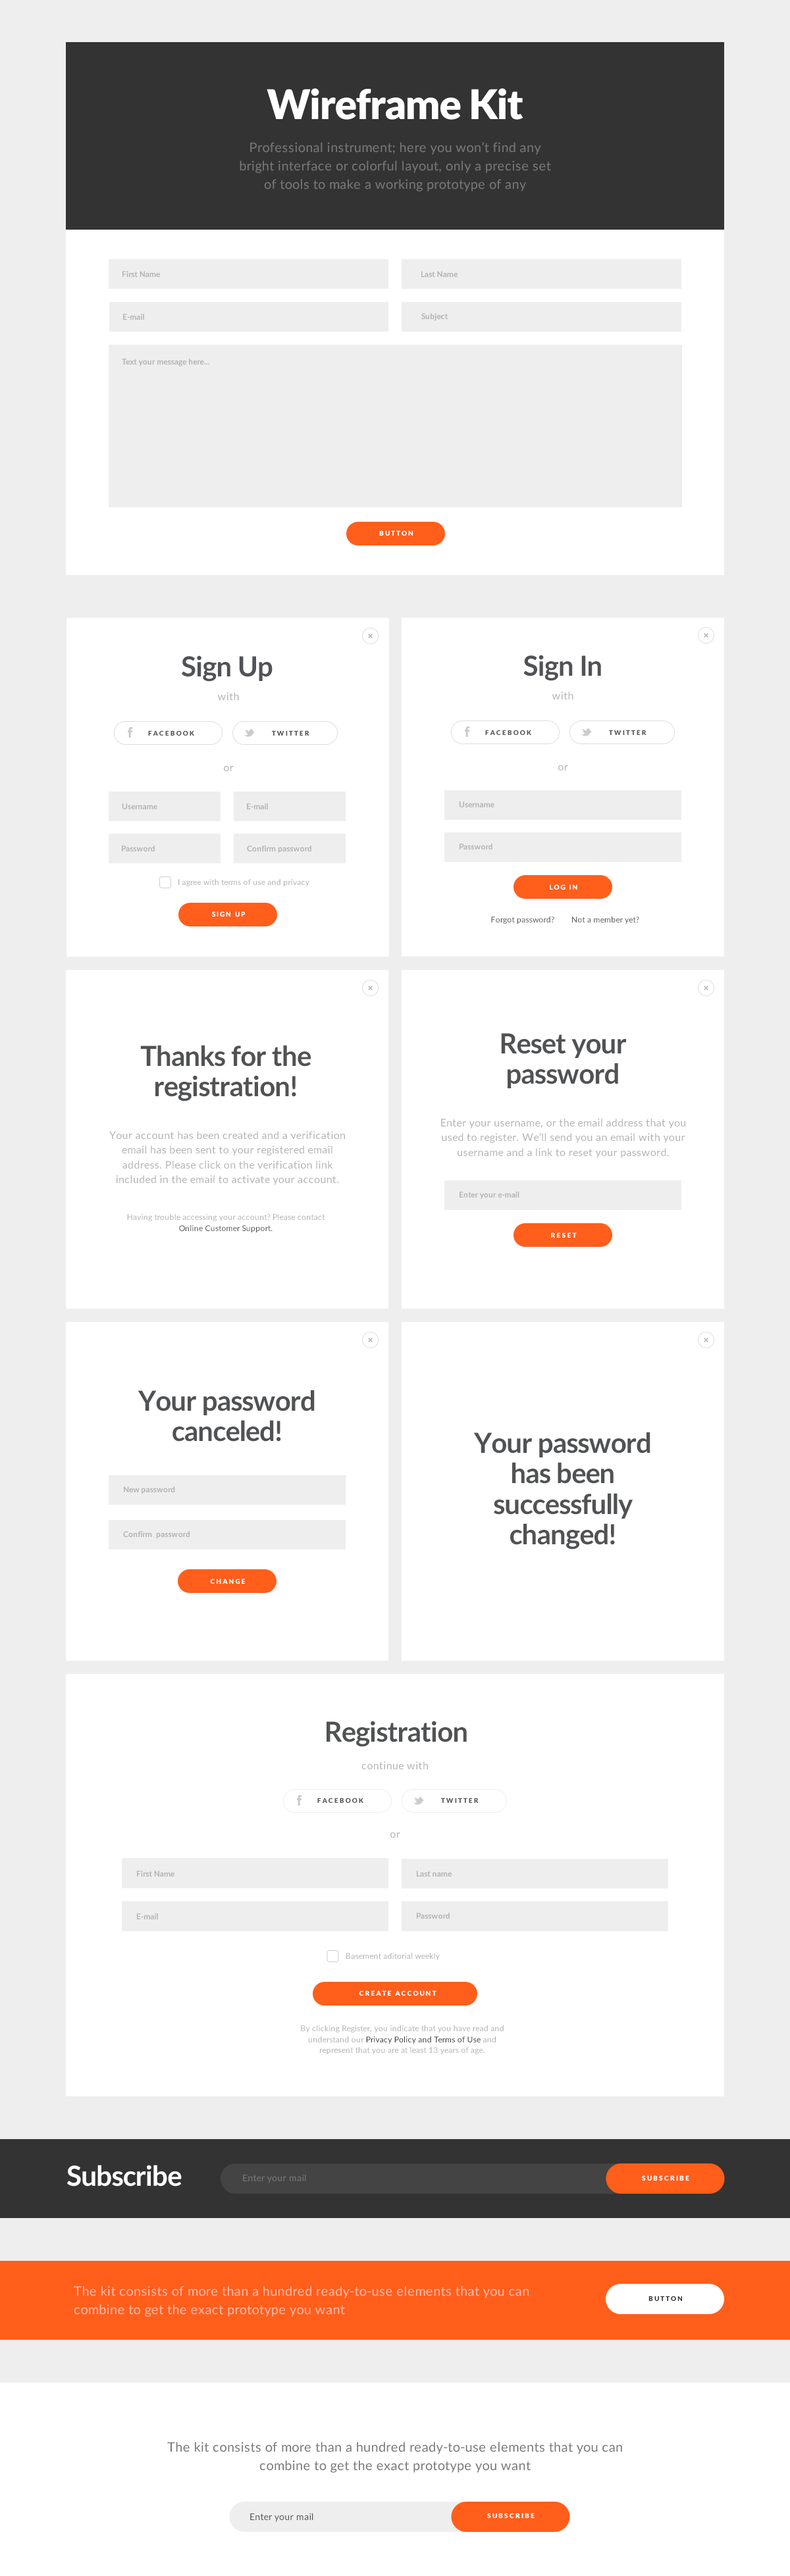
<style>
.page{position:relative;width:790px;height:2576px;background:#ffffff}
.page>*{position:absolute;margin:0}
.t1{font:40.8px "Lato-Black";letter-spacing:-0.02em;color:#ffffff}
.t2{font:13.2px/18.4px "Lato-Regular";letter-spacing:0.02em;color:#777777}
.t3{font:7.9px "Lato-Bold";letter-spacing:0.01em;color:#b2b2b2}
.t4{font:6.6px "Lato-Black";letter-spacing:0.2em;color:#ffffff}
.t5{font:27.6px "Lato-Bold";letter-spacing:-0.02em;color:#515255}
.t6{font:10.5px "Lato-Regular";letter-spacing:0.02em;color:#b2b2b2}
.t7{font:6.6px "Lato-Black";letter-spacing:0.2em;color:#515356}
.t8{font:7.9px "Lato-Regular";letter-spacing:0.02em;color:#b2b2b2}
.t9{font:6.6px "Lato-Bold";letter-spacing:0.2em;color:#ffffff}
.t10{font:7.9px "Lato-Regular";letter-spacing:0.02em;color:#515356}
.t11{font:27.6px/30.4px "Lato-Bold";letter-spacing:-0.02em;color:#515254}
.t12{font:10.5px/14.7px "Lato-Regular";letter-spacing:0.02em;color:#b2b2b2}
.t13{font:7.9px/11.1px "Lato-Regular";letter-spacing:0.02em;color:#b2b2b2}
.t14{font:7.9px/11.1px "Lato-Regular";letter-spacing:0.02em;color:#515255}
.t15{font:27.6px "Lato-Bold";letter-spacing:-0.02em;color:#515253}
.t16{font:7.9px/11.1px "Lato-Regular";letter-spacing:0.02em;color:#333333}
.t17{font:27.6px "Lato-Bold";letter-spacing:-0.02em;color:#ffffff}
.t18{font:9.2px "Lato-Regular";letter-spacing:0.02em;color:#777777}
.t19{font:13.2px/18.4px "Lato-Regular";letter-spacing:0.02em;color:#ffb8a5}
.t20{font:6.6px "Lato-Black";letter-spacing:0.2em;color:#333333}
.t21{font:9.2px "Lato-Regular";letter-spacing:0.02em;color:#515356}
</style>
<div class="page">
<p class="t1" style="left:266px;top:88px;width:257px;height:32px">Wireframe Kit</p>
<p class="t2" style="left:240px;top:141px;width:311px;height:50px;text-align:center">Professional instrument; here you won’t find any bright interface or colorful layout, only a precise set of tools to make a working prototype of any complexity</p>
<p class="t3" style="left:122px;top:271px;width:38px;height:6px">First Name</p>
<p class="t3" style="left:421px;top:271px;width:36px;height:6px">Last Name</p>
<p class="t3" style="left:123px;top:314px;width:21px;height:6px">E-mail</p>
<p class="t3" style="left:421px;top:313px;width:27px;height:8px">Subject</p>
<p class="t3" style="left:122px;top:359px;width:88px;height:7px">Text your message here...</p>
<p class="t4" style="left:379px;top:530px;width:34px;height:6px">BUTTON</p>
<p class="t5" style="left:182px;top:655px;width:90px;height:27px">Sign Up</p>
<p class="t5" style="left:523px;top:655px;width:78px;height:26px">Sign In</p>
<p class="t6" style="left:217px;top:692px;width:22px;height:8px">with</p>
<p class="t6" style="left:551px;top:692px;width:22px;height:7px">with</p>
<p class="t7" style="left:148px;top:730px;width:46px;height:6px">FACEBOOK</p>
<p class="t7" style="left:272px;top:730px;width:37px;height:6px">TWITTER</p>
<p class="t7" style="left:485px;top:730px;width:46px;height:5px">FACEBOOK</p>
<p class="t7" style="left:609px;top:730px;width:37px;height:5px">TWITTER</p>
<p class="t6" style="left:224px;top:766px;width:10px;height:5px">or</p>
<p class="t6" style="left:558px;top:765px;width:10px;height:5px">or</p>
<p class="t3" style="left:122px;top:803px;width:35px;height:6px">Username</p>
<p class="t3" style="left:247px;top:803px;width:21px;height:6px">E-mail</p>
<p class="t3" style="left:459px;top:801px;width:35px;height:6px">Username</p>
<p class="t3" style="left:122px;top:846px;width:33px;height:5px">Password</p>
<p class="t3" style="left:247px;top:846px;width:64px;height:7px">Confirm password</p>
<p class="t3" style="left:459px;top:844px;width:33px;height:5px">Password</p>
<p class="t8" style="left:178px;top:879px;width:131px;height:7px">I agree with terms of use and privacy</p>
<p class="t9" style="left:549px;top:884px;width:28px;height:6px">LOG IN</p>
<p class="t9" style="left:212px;top:911px;width:33px;height:6px">SIGN UP</p>
<p class="t10" style="left:491px;top:917px;width:63px;height:7px">Forgot password?</p>
<p class="t10" style="left:572px;top:917px;width:67px;height:7px">Not a member yet?</p>
<p class="t11" style="left:501px;top:1033px;width:125px;height:55px;text-align:center">Reset your password</p>
<p class="t11" style="left:140px;top:1045px;width:171px;height:56px;text-align:center">Thanks for the registration!</p>
<p class="t12" style="left:441px;top:1119px;width:244px;height:39px;text-align:center">Enter your username, or the email address that you used to register. We’ll send you an email with your username and a link to reset your password.</p>
<p class="t12" style="left:109px;top:1131px;width:236px;height:54px;text-align:center">Your account has been created and a verification email has been sent to your registered email address. Please click on the verification link included in the email to activate your account.</p>
<p class="t3" style="left:459px;top:1192px;width:60px;height:7px">Enter your e-mail</p>
<p class="t13" style="left:127px;top:1214px;width:198px;height:18px;text-align:center">Having trouble accessing your account? Please contact <span class="t14">Online Customer Support.</span></p>
<p class="t4" style="left:551px;top:1232px;width:25px;height:6px">RESET</p>
<p class="t11" style="left:138px;top:1390px;width:177px;height:52px;text-align:center">Your password<br>canceled!</p>
<p class="t11" style="left:473px;top:1432px;width:177px;height:118px;text-align:center">Your password has been successfully changed!</p>
<p class="t3" style="left:124px;top:1486px;width:51px;height:8px">New password</p>
<p class="t3" style="left:123px;top:1531px;width:66px;height:7px">Confirm  password</p>
<p class="t4" style="left:210px;top:1578px;width:35px;height:6px">CHANGE</p>
<p class="t15" style="left:326px;top:1721px;width:141px;height:26px">Registration</p>
<p class="t6" style="left:361px;top:1761px;width:67px;height:8px">continue with</p>
<p class="t7" style="left:317px;top:1798px;width:46px;height:5px">FACEBOOK</p>
<p class="t7" style="left:441px;top:1798px;width:37px;height:5px">TWITTER</p>
<p class="t6" style="left:390px;top:1832px;width:10px;height:6px">or</p>
<p class="t3" style="left:137px;top:1871px;width:37px;height:6px">First Name</p>
<p class="t3" style="left:417px;top:1871px;width:34px;height:6px">Last name</p>
<p class="t3" style="left:137px;top:1913px;width:21px;height:6px">E-mail</p>
<p class="t3" style="left:417px;top:1913px;width:32px;height:6px">Password</p>
<p class="t8" style="left:346px;top:1953px;width:94px;height:7px">Basement aditorial weekly digest</p>
<p class="t4" style="left:359px;top:1990px;width:77px;height:6px">CREATE ACCOUNT</p>
<p class="t13" style="left:301px;top:2025px;width:202px;height:29px;text-align:center">By clicking Register, you indicate that you have read and understand our <span class="t16">Privacy Policy and Terms of Use</span> and represent that you are at least 13 years of age.</p>
<p class="t17" style="left:67px;top:2165px;width:115px;height:21px">Subscribe</p>
<p class="t18" style="left:243px;top:2174px;width:63px;height:9px">Enter your mail</p>
<p class="t4" style="left:642px;top:2175px;width:47px;height:6px">SUBSCRIBE</p>
<p class="t19" style="left:74px;top:2286px;width:454px;height:31px">The kit consists of more than a hundred ready-to-use elements that you can combine to get the exact prototype you want</p>
<p class="t20" style="left:648px;top:2296px;width:34px;height:5px">BUTTON</p>
<p class="t2" style="left:167px;top:2442px;width:455px;height:31px;text-align:center">The kit consists of more than a hundred ready-to-use elements that you can combine to get the exact prototype you want</p>
<p class="t21" style="left:250px;top:2513px;width:63px;height:9px">Enter your mail</p>
<p class="t4" style="left:487px;top:2513px;width:47px;height:5px">SUBSCRIBE</p>
</div>
